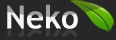
<style>
.page{position:relative;width:116px;height:40px;background:#272727}
.page>*{position:absolute;margin:0}
.t1{font:31.5px "TrebuchetMS";font-weight:bold}
</style>
<div class="page">
<p class="t1" style="left:7px;top:4px;width:71px;height:25px">Neko</p>
</div>
